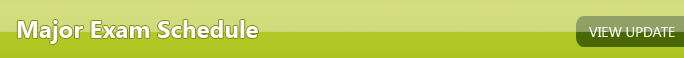
<style>
.page{position:relative;width:684px;height:58px}
.page>*{position:absolute;margin:0}
.t1{font:24px "SegoeUI-Bold";color:#fefefe}
.t2{font:14px "SegoeUI";color:#f6f7f1}
</style>
<div class="page">
<p class="t1" style="left:17px;top:20px;width:241px;height:24px">Major Exam Schedule</p>
<p class="t2" style="left:589px;top:27px;width:86px;height:10px">VIEW UPDATE</p>
</div>
